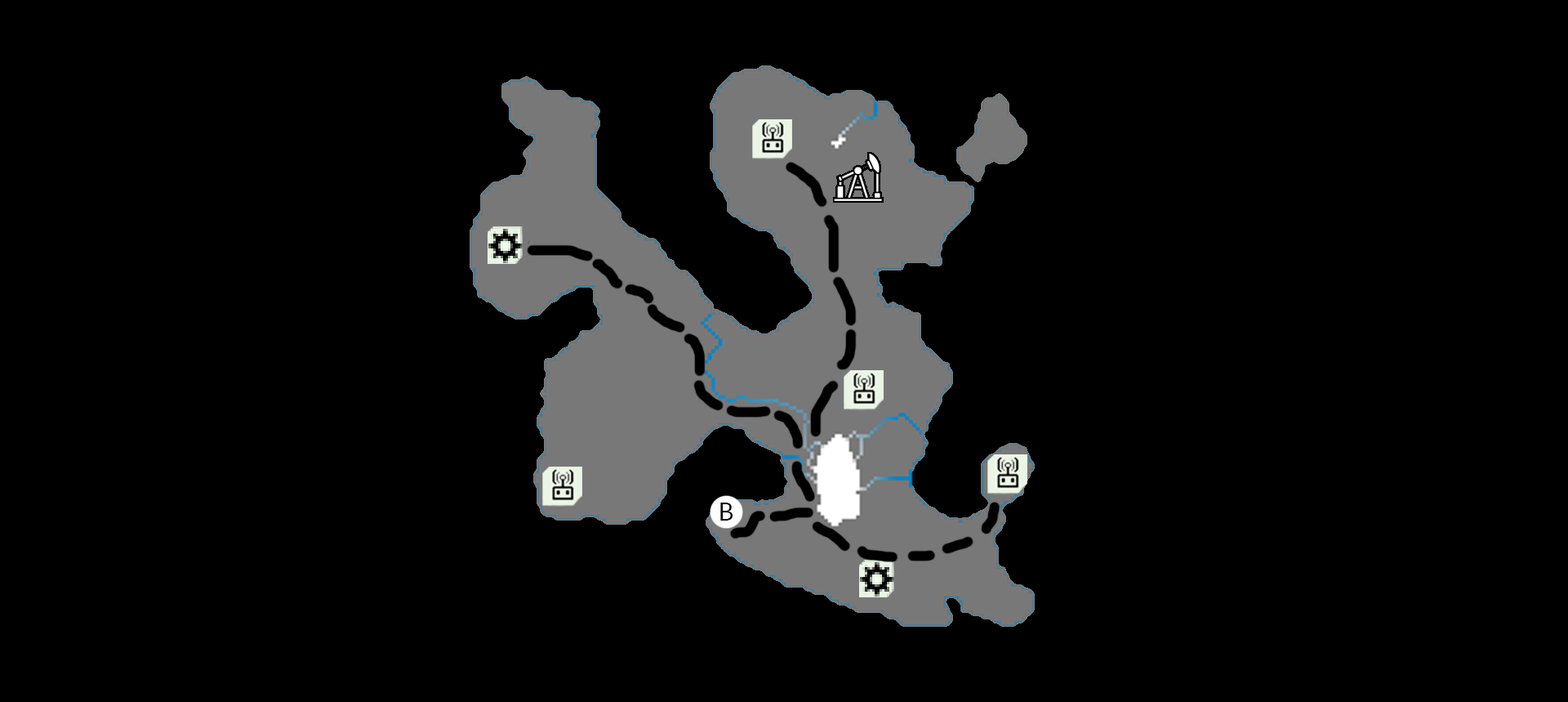
<style>
.page{position:relative;width:1568px;height:702px;background:#000000}
.page>*{position:absolute;margin:0}
.t1{font:27.3px "SourceCodePro-Regular";color:#000000}
</style>
<div class="page">
<p class="t1" style="left:720px;top:502px;width:13px;height:18px">B</p>
</div>
